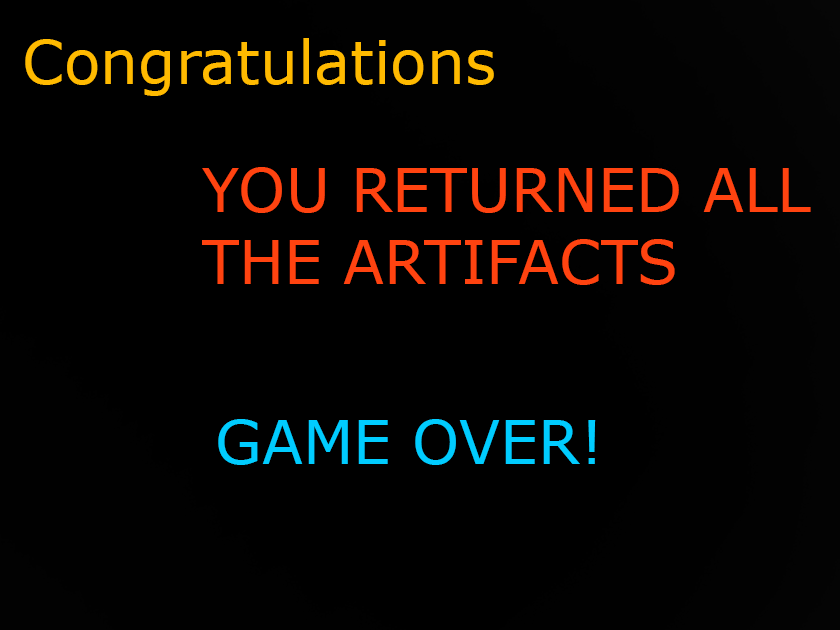
<style>
.page{position:relative;width:840px;height:630px;background:#000000}
.page>*{position:absolute;margin:0}
.t1{font:60px "Verdana";color:#ffba00}
.t2{font:60px "Verdana";color:#ff4310}
.t3{font:60px "Verdana";color:#00ccff}
</style>
<div class="page">
<p class="t1" style="left:25px;top:38px;width:469px;height:58px">Congratulations</p>
<p class="t2" style="left:202px;top:167px;width:609px;height:118px">YOU RETURNED ALL<br>THE ARTIFACTS</p>
<p class="t3" style="left:218px;top:419px;width:378px;height:46px">GAME OVER!</p>
</div>
